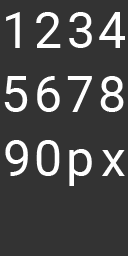
<style>
.page{position:relative;width:128px;height:256px;background:#333333}
.page>*{position:absolute;margin:0}
.t1{font:12px "Roboto-Regular";color:#ffffff}
</style>
<div class="page">
<p class="t1" style="left:6px;top:12px;width:14px;height:36px">1</p>
<p class="t1" style="left:36px;top:12px;width:25px;height:36px">2</p>
<p class="t1" style="left:69px;top:12px;width:23px;height:36px">3</p>
<p class="t1" style="left:99px;top:12px;width:26px;height:36px">4</p>
<p class="t1" style="left:4px;top:76px;width:24px;height:36px">5</p>
<p class="t1" style="left:37px;top:76px;width:23px;height:36px">6</p>
<p class="t1" style="left:67px;top:76px;width:25px;height:36px">7</p>
<p class="t1" style="left:100px;top:76px;width:24px;height:36px">8</p>
<p class="t1" style="left:5px;top:140px;width:23px;height:36px">9</p>
<p class="t1" style="left:36px;top:140px;width:24px;height:36px">0</p>
<p class="t1" style="left:69px;top:149px;width:23px;height:37px">p</p>
<p class="t1" style="left:102px;top:150px;width:23px;height:26px">x</p>
</div>
